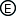
<style>
.page{position:relative;width:16px;height:16px;background:#ffffff}
.page>*{position:absolute;margin:0}
.t1{font:13px "CenturyGothic";color:#000000}
</style>
<div class="page">
<p class="t1" style="left:5px;top:4px;width:6px;height:9px">E</p>
</div>
